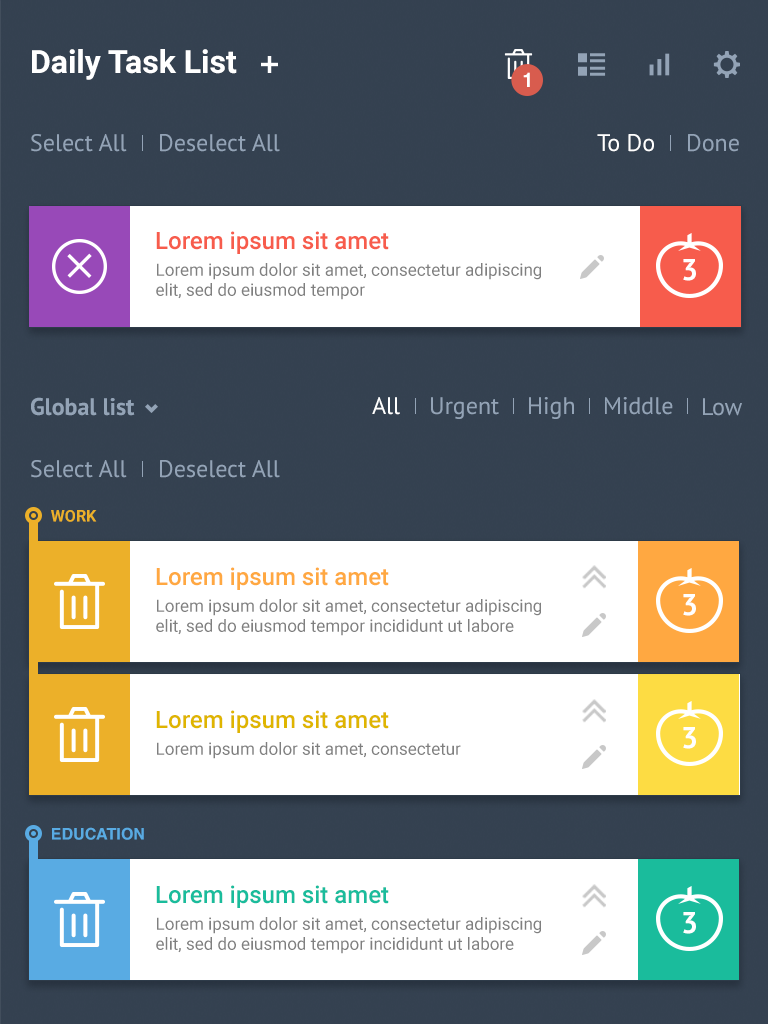
<style>
.page{position:relative;width:768px;height:1024px;background:#ffffff}
.page>*{position:absolute;margin:0}
.t1{font:32px "Roboto-Bold";color:#ffffff}
.t2{font:20.3px "Helvetica-Bold";color:#ffffff}
.t3{font:24px "PTSans-Regular";color:#93a3b6}
.t4{font:24px "PTSans-Regular";color:#ffffff}
.t5{font:24px "Roboto-Medium";color:#f75c4c}
.t6{font:17px/20px "Roboto-Regular";color:#7f7f7f}
.t7{font:30px "PTSans-Bold";color:#ffffff}
.t8{font:24px "PTSans-Bold";color:#93a3b6}
.t9{font:16px "Roboto-Bold";color:#ecb129}
.t10{font:24px "Roboto-Medium";color:#ffa841}
.t11{font:24px "Roboto-Medium";color:#dfb500}
.t12{font:17px "Roboto-Regular";color:#7f7f7f}
.t13{font:16px "Helvetica-Bold";color:#59abe3}
.t14{font:24px "Roboto-Medium";color:#1abc9c}
</style>
<div class="page">
<p class="t1" style="left:32px;top:49px;width:205px;height:31px">Daily Task List</p>
<p class="t2" style="left:523px;top:72px;width:7px;height:15px">1</p>
<p class="t3" style="left:31px;top:134px;width:96px;height:18px">Select All</p>
<p class="t3" style="left:160px;top:134px;width:120px;height:18px">Deselect All</p>
<p class="t4" style="left:597px;top:134px;width:57px;height:18px">To Do</p>
<p class="t3" style="left:688px;top:134px;width:51px;height:18px">Done</p>
<p class="t5" style="left:156px;top:231px;width:233px;height:23px">Lorem ipsum sit amet</p>
<p class="t6" style="left:156px;top:263px;width:385px;height:37px">Lorem ipsum dolor sit amet, consectetur adipiscing elit, sed do eiusmod tempor</p>
<p class="t7" style="left:683px;top:259px;width:13px;height:22px">3</p>
<p class="t8" style="left:31px;top:397px;width:104px;height:19px">Global list</p>
<p class="t4" style="left:372px;top:397px;width:28px;height:18px">All</p>
<p class="t3" style="left:431px;top:397px;width:68px;height:22px">Urgent</p>
<p class="t3" style="left:529px;top:397px;width:45px;height:22px">High</p>
<p class="t3" style="left:605px;top:397px;width:68px;height:18px">Middle</p>
<p class="t3" style="left:703px;top:398px;width:39px;height:18px">Low</p>
<p class="t3" style="left:31px;top:460px;width:96px;height:18px">Select All</p>
<p class="t3" style="left:160px;top:460px;width:120px;height:18px">Deselect All</p>
<p class="t9" style="left:51px;top:510px;width:46px;height:12px">WORK</p>
<p class="t10" style="left:156px;top:567px;width:233px;height:23px">Lorem ipsum sit amet</p>
<p class="t6" style="left:156px;top:599px;width:385px;height:37px">Lorem ipsum dolor sit amet, consectetur adipiscing elit, sed do eiusmod tempor incididunt ut labore</p>
<p class="t7" style="left:683px;top:594px;width:13px;height:22px">3</p>
<p class="t11" style="left:156px;top:710px;width:233px;height:23px">Lorem ipsum sit amet</p>
<p class="t7" style="left:683px;top:727px;width:13px;height:22px">3</p>
<p class="t12" style="left:157px;top:742px;width:304px;height:17px">Lorem ipsum dolor sit amet, consectetur</p>
<p class="t13" style="left:52px;top:827px;width:92px;height:13px">EDUCATION</p>
<p class="t14" style="left:156px;top:885px;width:233px;height:23px">Lorem ipsum sit amet</p>
<p class="t6" style="left:156px;top:917px;width:385px;height:37px">Lorem ipsum dolor sit amet, consectetur adipiscing elit, sed do eiusmod tempor incididunt ut labore</p>
<p class="t7" style="left:683px;top:912px;width:13px;height:22px">3</p>
</div>
